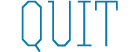
<style>
.page{position:relative;width:138px;height:52px;background:#ffffff}
.page>*{position:absolute;margin:0}
.t1{font:60px "RexLight";color:#0a7aaa;font-weight:bold}
</style>
<div class="page">
<p class="t1" style="left:21px;top:0px;width:97px;height:52px">QUIT</p>
</div>
